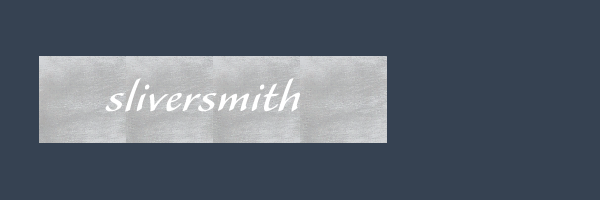
<style>
.page{position:relative;width:600px;height:200px;background:#364252}
.page>*{position:absolute;margin:0}
.t1{font:49.6px "AlexaStd";letter-spacing:0.025em;color:#ffffff}
</style>
<div class="page">
<p class="t1" style="left:105px;top:78px;width:195px;height:34px">sliversmith</p>
</div>
